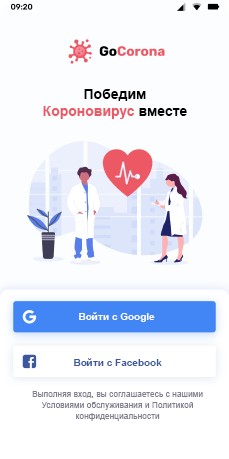
<style>
.page{position:relative;width:229px;height:459px;background:#fcfdfe}
.page>*{position:absolute;margin:0}
.t1{font:14px/17px "Arial-BoldMT";color:#ec5863}
.t2{font:14px "Arial-BoldMT";color:#000000}
.t3{font:14px/17px "Arial-BoldMT";color:#000000}
.t4{font:10px "Arial-BoldMT";color:#ffffff}
.t5{font:10px "Arial-BoldMT";color:#3b579d}
.t6{font:8px/11px "ArialMT";letter-spacing:0.025em;color:#7e7e8d}
</style>
<div class="page">
<p class="t1" style="left:43px;top:89px;width:144px;height:30px;text-align:center"><span class="t2"><br><br></span><span class="t3">Победим <br></span>Короновирус<span class="t3"> вместе</span></p>
<p class="t4" style="left:79px;top:312px;width:76px;height:10px">Войти с Google</p>
<p class="t5" style="left:74px;top:358px;width:88px;height:8px">Войти с Facebook</p>
<p class="t6" style="left:32px;top:391px;width:171px;height:30px;text-align:center">Выполняя вход, вы соглашаетесь с нашими Условиями обслуживания и Политикой конфиденциальности</p>
</div>
